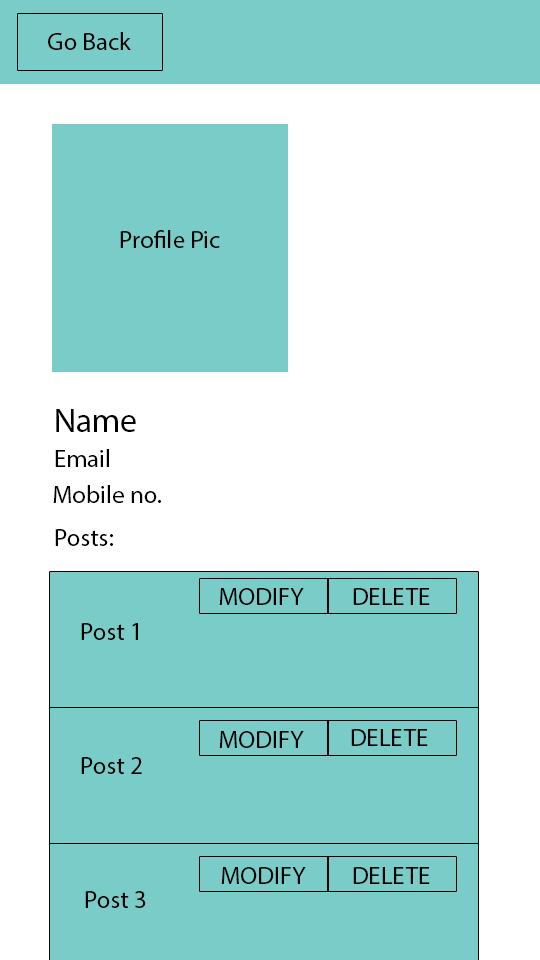
<style>
.page{position:relative;width:540px;height:960px;background:#7accc8}
.page>*{position:absolute;margin:0}
.t1{font:25px "MyriadPro-Regular";color:#000000}
.t2{font:33.3px "MyriadPro-Regular";color:#000000}
</style>
<div class="page">
<p class="t1" style="left:48px;top:32px;width:83px;height:18px">Go Back</p>
<p class="t1" style="left:120px;top:230px;width:100px;height:18px">Profile Pic</p>
<p class="t2" style="left:56px;top:409px;width:80px;height:23px">Name</p>
<p class="t1" style="left:55px;top:449px;width:54px;height:18px">Email</p>
<p class="t1" style="left:53px;top:485px;width:108px;height:18px">Mobile no.</p>
<p class="t1" style="left:55px;top:529px;width:58px;height:17px">Posts:</p>
<p class="t1" style="left:219px;top:588px;width:85px;height:17px">MODIFY</p>
<p class="t1" style="left:353px;top:588px;width:77px;height:17px">DELETE</p>
<p class="t1" style="left:81px;top:623px;width:57px;height:17px">Post 1</p>
<p class="t1" style="left:219px;top:731px;width:85px;height:17px">MODIFY</p>
<p class="t1" style="left:351px;top:729px;width:77px;height:17px">DELETE</p>
<p class="t1" style="left:81px;top:757px;width:61px;height:17px">Post 2</p>
<p class="t1" style="left:221px;top:867px;width:85px;height:17px">MODIFY</p>
<p class="t1" style="left:353px;top:867px;width:77px;height:17px">DELETE</p>
<p class="t1" style="left:85px;top:891px;width:61px;height:17px">Post 3</p>
</div>
